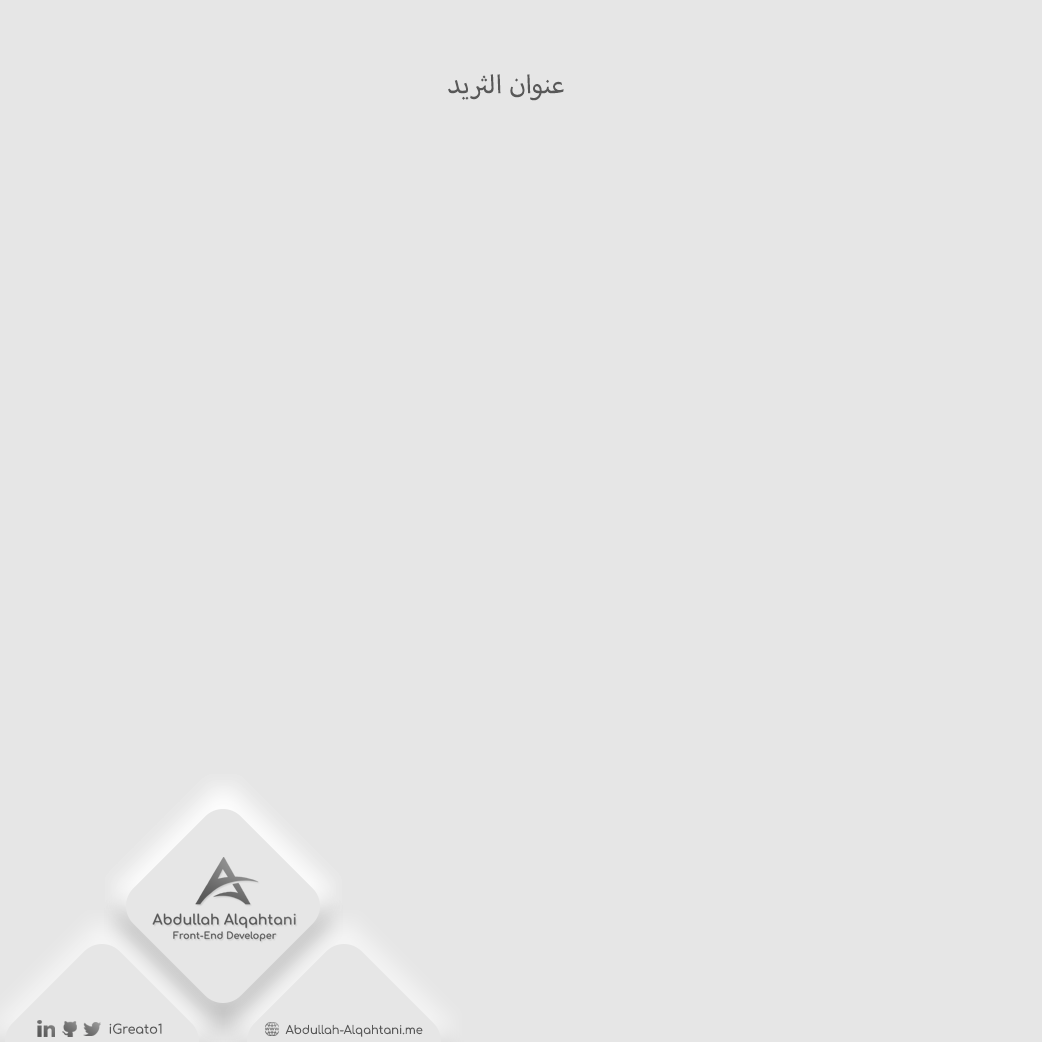
<style>
.page{position:relative;width:1042px;height:1042px;background:#e6e6e6}
.page>*{position:absolute;margin:0}
.t1{font:36px "MyriadArabic-Regular";color:#585858}
.t2{font:12.9px "Comfortaa-Regular";color:#585858}
.t3{font:11.5px "Comfortaa-Regular";color:#585858}
</style>
<div class="page">
<p class="t1" style="left:448px;top:74px;width:116px;height:27px">عنوان الثريد</p>
<p class="t2" style="left:109px;top:1023px;width:53px;height:11px">iGreato1</p>
<p class="t3" style="left:285px;top:1024px;width:138px;height:13px">Abdullah-Alqahtani.me</p>
</div>
